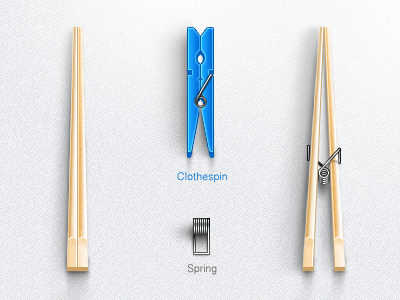
<style>
.page{position:relative;width:400px;height:300px}
.page>*{position:absolute;margin:0}
.t1{font:11px "KhmerSangamMN"}
</style>
<div class="page">
<p class="t1" style="left:177px;top:172px;width:50px;height:11px">Clothespin</p>
<p class="t1" style="left:187px;top:264px;width:30px;height:11px">Spring</p>
</div>
